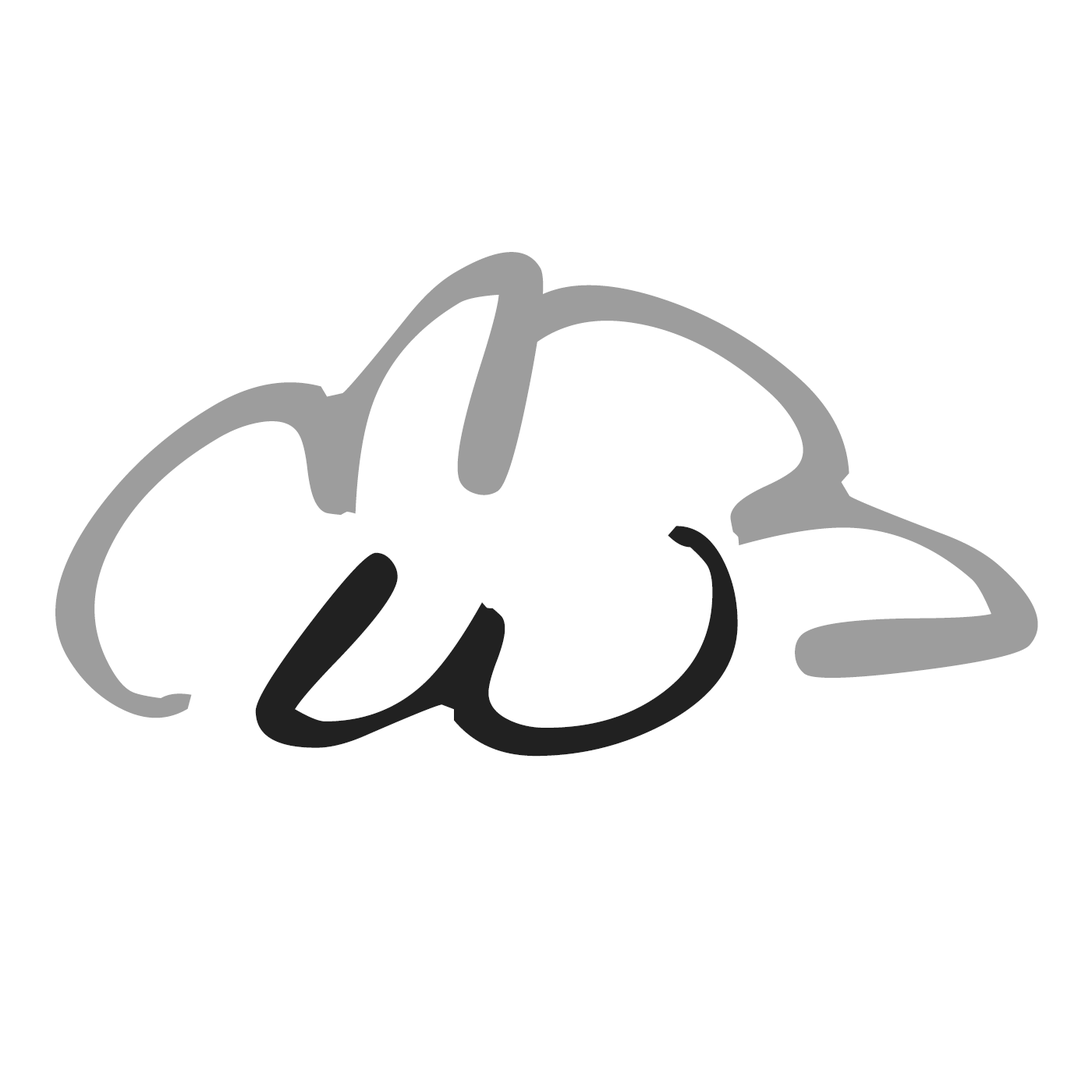
<style>
.page{position:relative;width:1092px;height:1092px;background:#ffffff}
.page>*{position:absolute;margin:0}
.t1{font:627.6px "Handwriting-Dakota";color:#9d9d9d;scale:1.17 1}
.t2{font:583.2px "Handwriting-Dakota";color:#212121}
</style>
<div class="page">
<p class="t1" style="left:55px;top:252px;width:489px;height:466px;rotate:149deg">w</p>
<p class="t1" style="left:479px;top:285px;width:559px;height:393px;rotate:-139deg">w</p>
<p class="t2" style="left:255px;top:526px;width:483px;height:231px">w</p>
</div>
